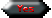
<style>
.page{position:relative;width:52px;height:18px;background:#ffffff}
.page>*{position:absolute;margin:0}
.t1{font:10px "LucidaSansUnicode";font-weight:bold}
</style>
<div class="page">
<p class="t1" style="left:17px;top:5px;width:17px;height:7px">Yes</p>
</div>
